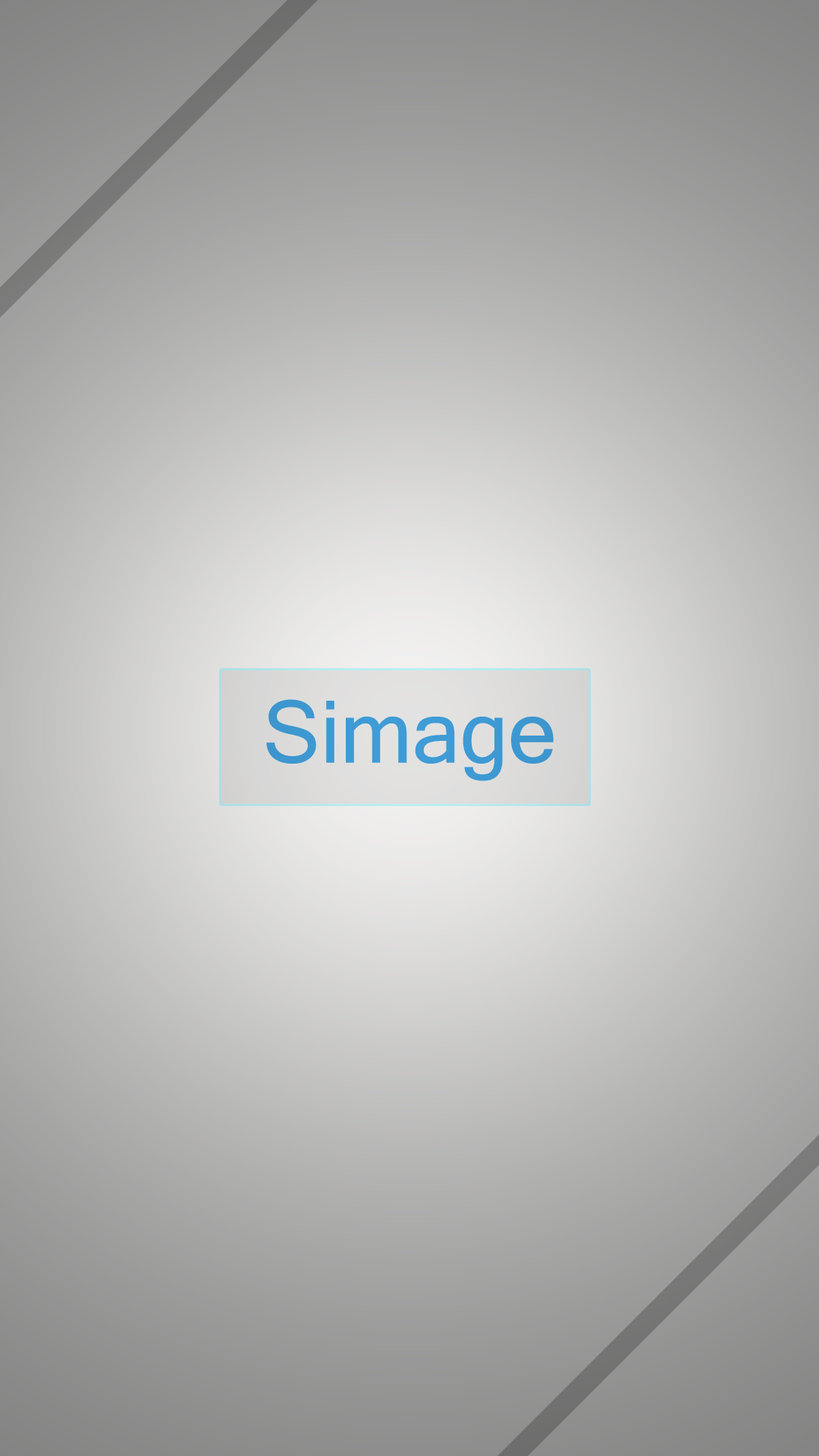
<style>
.page{position:relative;width:819px;height:1456px}
.page>*{position:absolute;margin:0}
.t1{font:83.4px "Mangal";color:#3e9ad3}
</style>
<div class="page">
<p class="t1" style="left:266px;top:699px;width:288px;height:82px">Simage</p>
</div>
